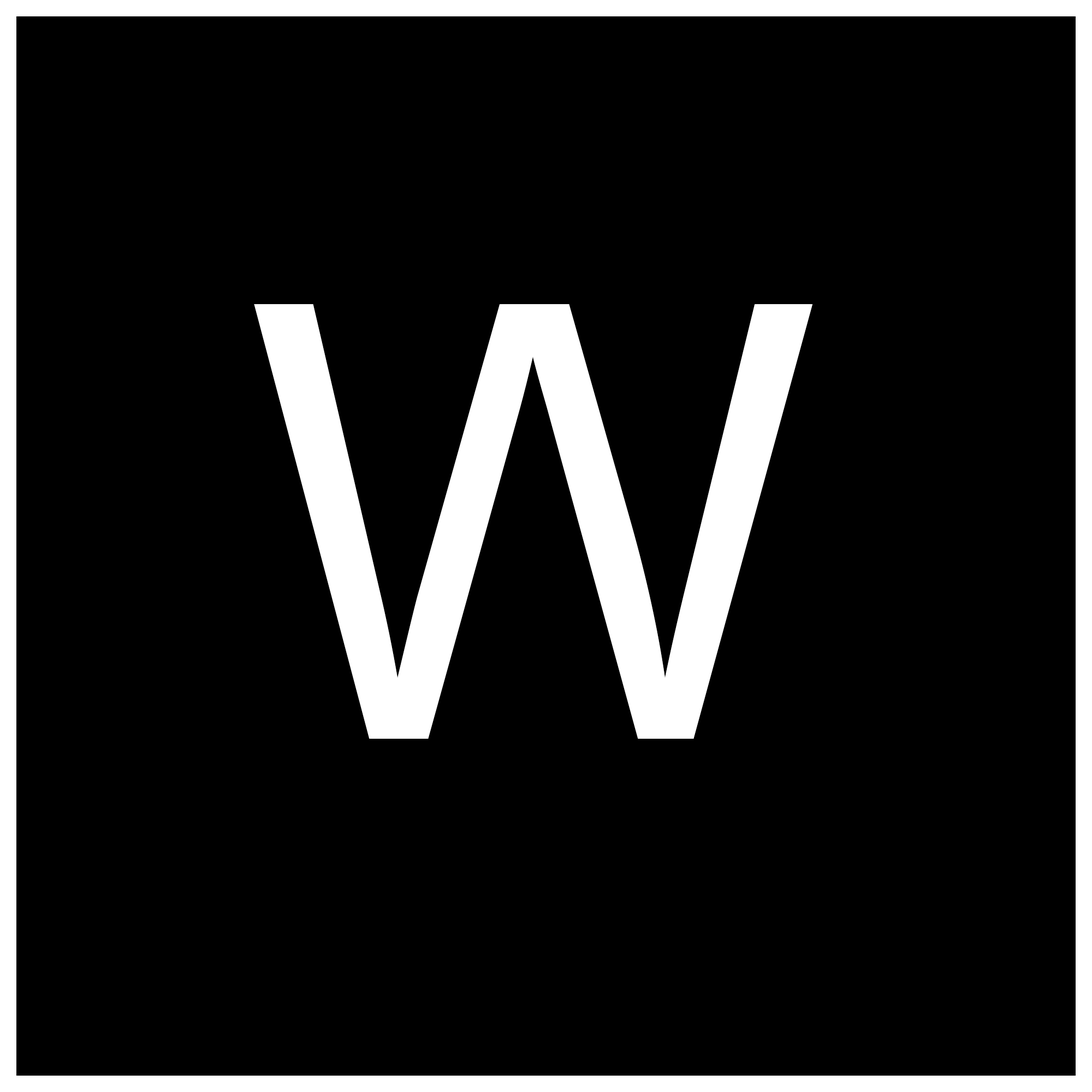
<style>
.page{position:relative;width:1092px;height:1092px;background:#000000}
.page>*{position:absolute;margin:0}
.t1{font:606.7px "ArialMT";color:#ffffff}
</style>
<div class="page">
<p class="t1" style="left:254px;top:304px;width:559px;height:435px">W</p>
</div>
